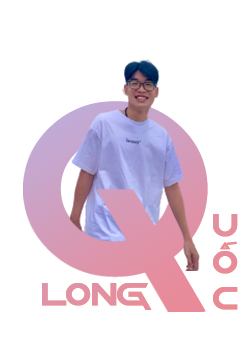
<style>
.page{position:relative;width:250px;height:350px;background:#ffffff}
.page>*{position:absolute;margin:0}
.t1{font:279.5px "Undefined";letter-spacing:-0.05em;font-variant:small-caps;font-weight:bold;scale:1.05 1}
.t2{font:50.4px/36.6px "Undefined";letter-spacing:-0.05em;color:#e78c9b;font-variant:small-caps;font-weight:bold;scale:1.05 1}
.t3{font:50.4px "Undefined";letter-spacing:-0.05em;color:#e290a3;font-variant:small-caps;font-weight:bold;scale:1.05 1}
</style>
<div class="page">
<p class="t1" style="left:23px;top:101px;width:185px;height:210px">Q</p>
<p class="t2" style="left:213px;top:214px;width:25px;height:96px">u<br>ố<br>c</p>
<p class="t2" style="left:213px;top:214px;width:25px;height:96px">u<br>ố<br>c</p>
<p class="t3" style="left:42px;top:283px;width:110px;height:27px">long</p>
<p class="t3" style="left:42px;top:283px;width:110px;height:27px">long</p>
</div>
